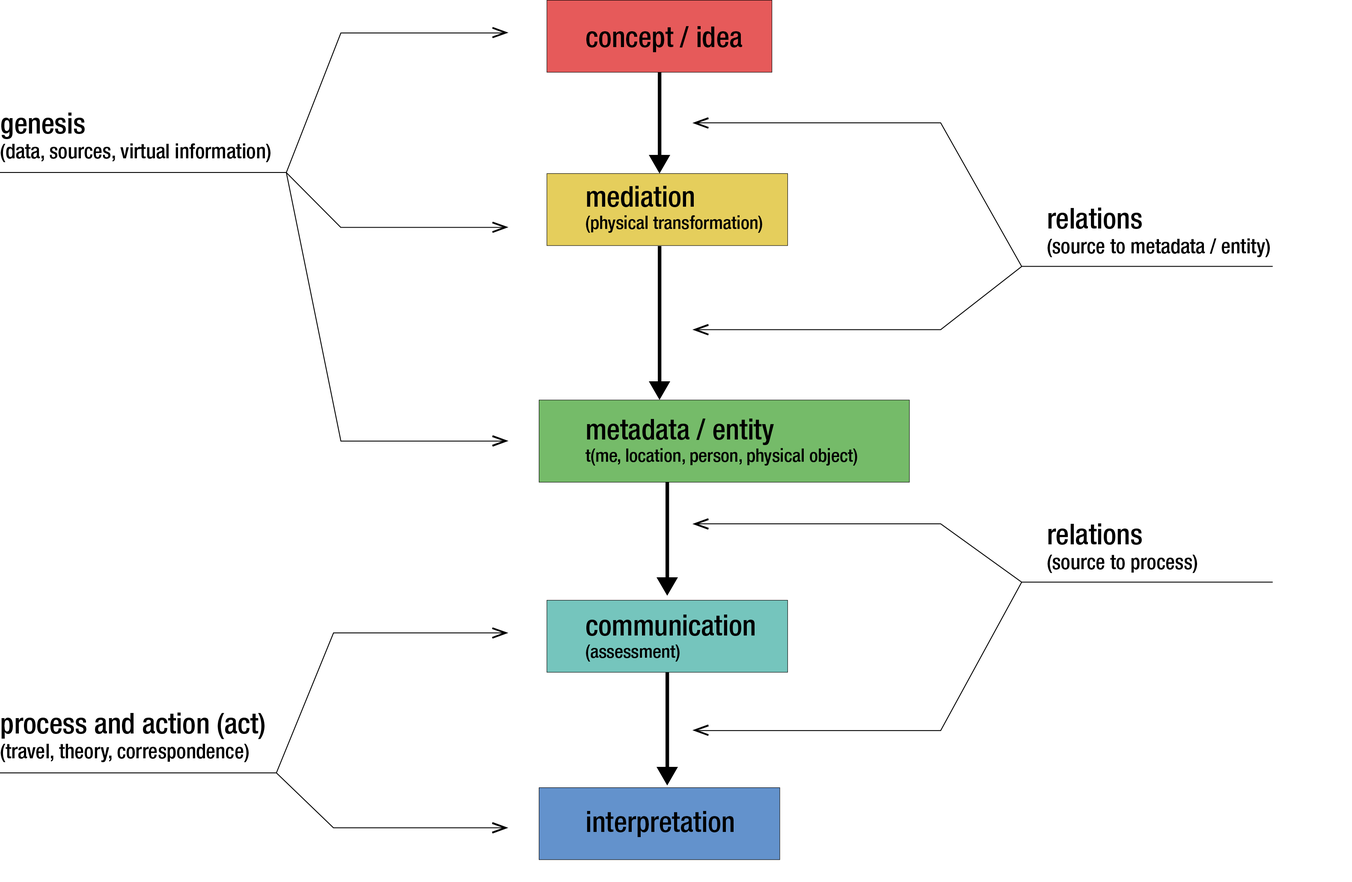
<style>
.page{position:relative;width:1352px;height:882px;background:#ffffff}
.page>*{position:absolute;margin:0}
.t1{font:28.8px "HelveticaNeueLTStd-MdCn";color:#000000}
.t2{font:20.6px "HelveticaNeueLTStd-MdCn";color:#000000}
.t3{font:18.5px "HelveticaNeueLTStd-MdCn";color:#000000}
</style>
<div class="page">
<p class="t1" style="left:586px;top:26px;width:156px;height:26px">concept / idea</p>
<p class="t1" style="left:1px;top:113px;width:84px;height:26px">genesis</p>
<p class="t2" style="left:0px;top:143px;width:270px;height:19px">(data, sources, virtual information)</p>
<p class="t1" style="left:587px;top:186px;width:107px;height:21px">mediation</p>
<p class="t1" style="left:1048px;top:208px;width:94px;height:21px">relations</p>
<p class="t3" style="left:586px;top:215px;width:176px;height:18px">(physical transformation)</p>
<p class="t2" style="left:1047px;top:238px;width:223px;height:19px">(source to metadata / entity)</p>
<p class="t1" style="left:587px;top:419px;width:187px;height:26px">metadata / entity</p>
<p class="t3" style="left:585px;top:448px;width:272px;height:18px">t(me, location, person, physical object)</p>
<p class="t1" style="left:1048px;top:523px;width:94px;height:22px">relations</p>
<p class="t2" style="left:1047px;top:555px;width:150px;height:18px">(source to process)</p>
<p class="t1" style="left:586px;top:615px;width:168px;height:21px">communication</p>
<p class="t3" style="left:586px;top:645px;width:94px;height:17px">(assessment)</p>
<p class="t1" style="left:1px;top:713px;width:263px;height:26px">process and action (act)</p>
<p class="t2" style="left:0px;top:744px;width:249px;height:18px">(travel, theory, correspondence)</p>
<p class="t1" style="left:587px;top:811px;width:147px;height:26px">interpretation</p>
</div>
